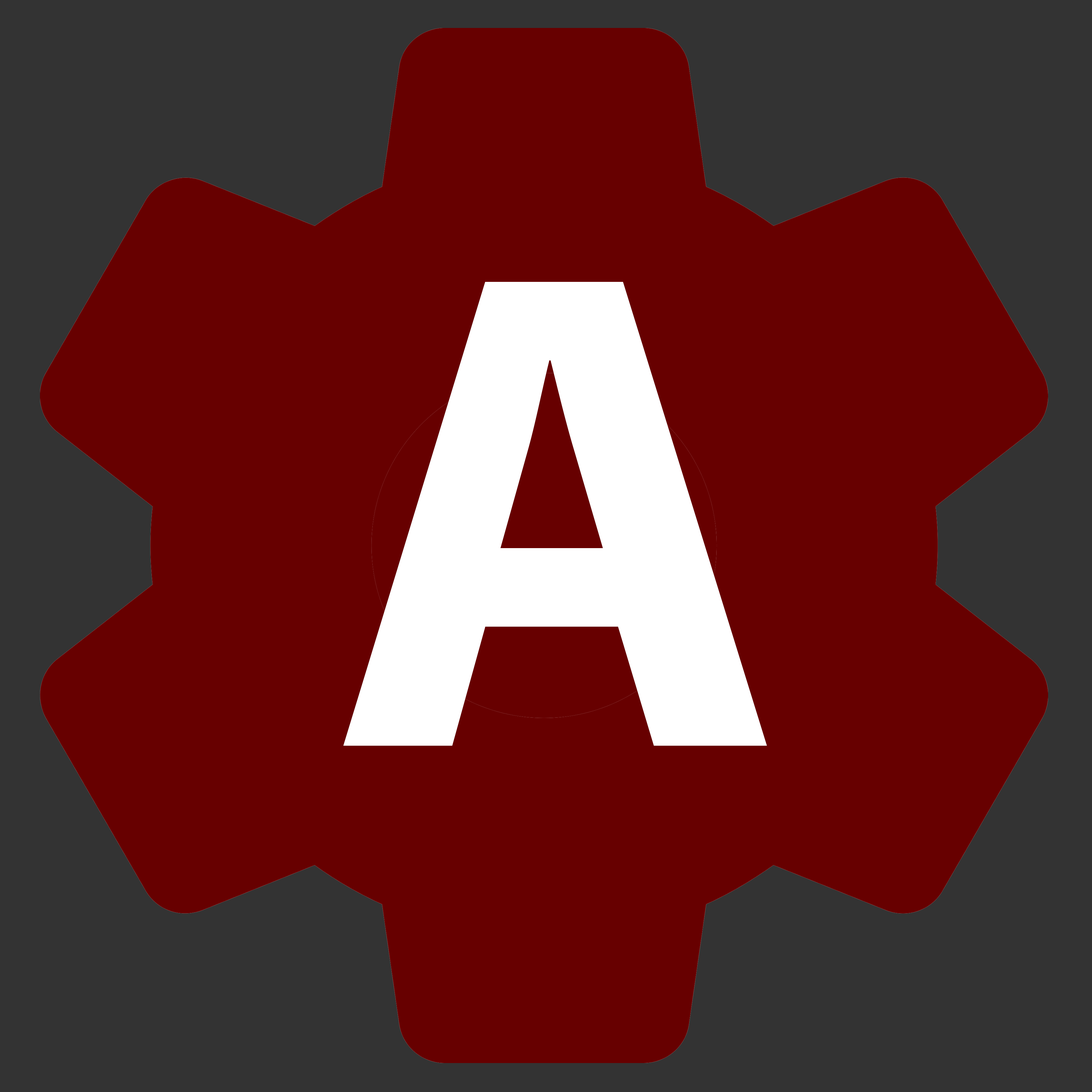
<style>
.page{position:relative;width:1092px;height:1092px;background:#670000}
.page>*{position:absolute;margin:0}
.t1{font:688.1px "MyriadPro-Bold";color:#ffffff}
</style>
<div class="page">
<p class="t1" style="left:343px;top:282px;width:424px;height:464px">A</p>
</div>
